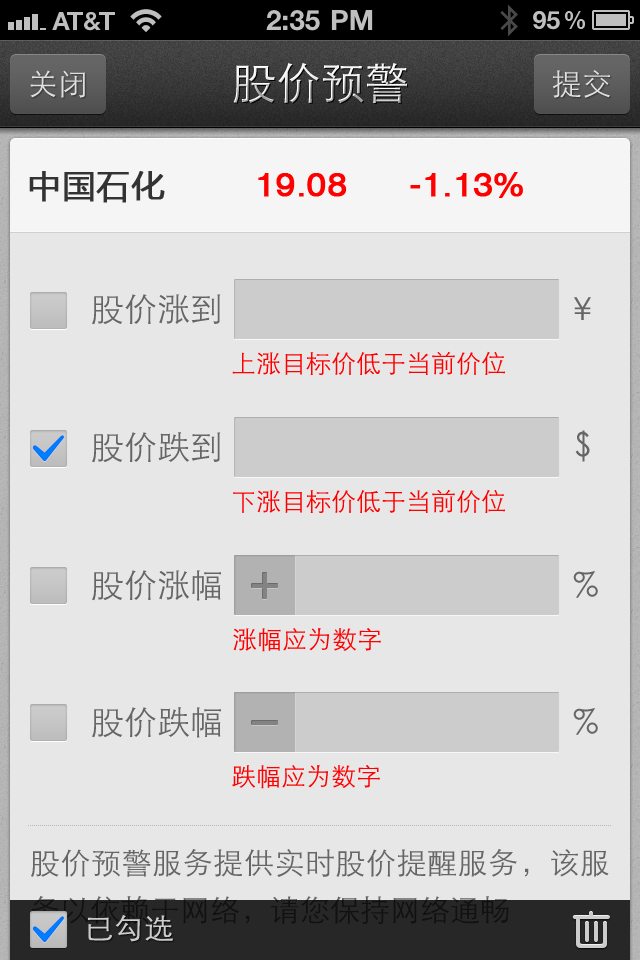
<style>
.page{position:relative;width:640px;height:960px;background:#e7e7e7}
.page>*{position:absolute;margin:0}
.t1{font:44px "STXihei";letter-spacing:0.005em;color:#ffffff}
.t2{font:30px "STXihei";letter-spacing:0.005em;color:#dfdfdf}
.t3{font:33px "MicrosoftYaHei";letter-spacing:0.025em;color:#333333;font-weight:bold}
.t4{font:33.2px "HelveticaCE-Regular";color:#ff0000;font-weight:bold;scale:1.05 1}
.t5{font:33px "STXihei";color:#666666}
.t6{font:25px "STXihei";color:#ff0000}
.t7{font:30px/47px "STXihei"}
.t8{font:28.5px "STXihei";color:#cccccc;scale:1.05 1}
</style>
<div class="page">
<p class="t1" style="left:233px;top:62px;width:174px;height:42px">股价预警</p>
<p class="t2" style="left:30px;top:70px;width:55px;height:28px">关闭</p>
<p class="t2" style="left:553px;top:70px;width:57px;height:28px">提交</p>
<p class="t3" style="left:29px;top:171px;width:136px;height:32px">中国石化</p>
<p class="t4" style="left:258px;top:173px;width:89px;height:24px">19.08</p>
<p class="t4" style="left:410px;top:172px;width:113px;height:26px">-1.13%</p>
<p class="t5" style="left:92px;top:294px;width:129px;height:31px">股价涨到</p>
<p class="t5" style="left:574px;top:297px;width:17px;height:23px">￥</p>
<p class="t6" style="left:232px;top:351px;width:273px;height:24px">上涨目标价低于当前价位</p>
<p class="t5" style="left:92px;top:432px;width:129px;height:31px">股价跌到</p>
<p class="t5" style="left:575px;top:430px;width:15px;height:32px">$</p>
<p class="t6" style="left:233px;top:489px;width:272px;height:24px">下涨目标价低于当前价位</p>
<p class="t5" style="left:92px;top:570px;width:129px;height:31px">股价涨幅</p>
<p class="t5" style="left:573px;top:571px;width:25px;height:27px">%</p>
<p class="t6" style="left:233px;top:628px;width:148px;height:24px">涨幅应为数字</p>
<p class="t5" style="left:92px;top:707px;width:129px;height:31px">股价跌幅</p>
<p class="t5" style="left:573px;top:708px;width:25px;height:27px">%</p>
<p class="t6" style="left:232px;top:765px;width:148px;height:24px">跌幅应为数字</p>
<p class="t7" style="left:31px;top:849px;width:578px;height:75px;text-align:justify">股价预警服务提供实时股价提醒服务，该服务以依赖于网络，请您保持网络通畅</p>
<p class="t8" style="left:88px;top:915px;width:85px;height:27px">已勾选</p>
</div>
